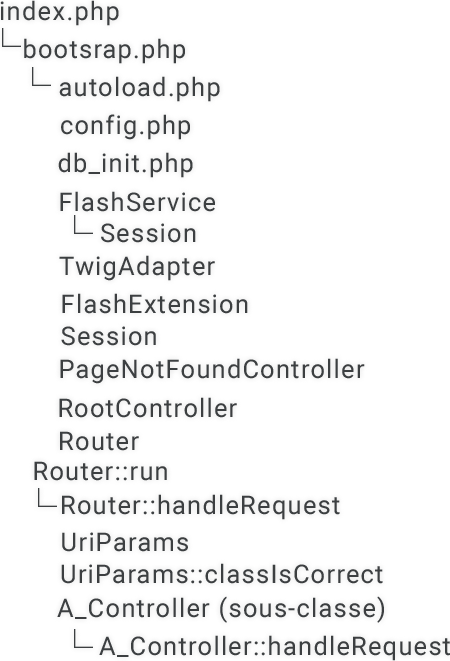
<style>
.page{position:relative;width:450px;height:661px;background:#ffffff}
.page>*{position:absolute;margin:0}
.t1{font:25.6px "Roboto-Regular";letter-spacing:0.05em;color:#3c3f41}
.t2{font:25.4px "Roboto-Regular";letter-spacing:0.05em;color:#3c3f41}
</style>
<div class="page">
<p class="t1" style="left:0px;top:0px;width:119px;height:26px">index.php</p>
<p class="t2" style="left:24px;top:38px;width:161px;height:26px">bootsrap.php</p>
<p class="t2" style="left:59px;top:76px;width:161px;height:26px">autoload.php</p>
<p class="t2" style="left:61px;top:114px;width:129px;height:26px">config.php</p>
<p class="t2" style="left:58px;top:152px;width:135px;height:26px">db_init.php</p>
<p class="t2" style="left:60px;top:191px;width:155px;height:21px">FlashService</p>
<p class="t2" style="left:101px;top:223px;width:95px;height:20px">Session</p>
<p class="t2" style="left:59px;top:255px;width:156px;height:26px">TwigAdapter</p>
<p class="t2" style="left:62px;top:293px;width:186px;height:21px">FlashExtension</p>
<p class="t2" style="left:61px;top:326px;width:95px;height:20px">Session</p>
<p class="t2" style="left:60px;top:358px;width:305px;height:26px">PageNotFoundController</p>
<p class="t2" style="left:59px;top:397px;width:178px;height:21px">RootController</p>
<p class="t2" style="left:60px;top:431px;width:79px;height:20px">Router</p>
<p class="t2" style="left:34px;top:461px;width:133px;height:20px">Router::run</p>
<p class="t2" style="left:62px;top:494px;width:278px;height:26px">Router::handleRequest</p>
<p class="t2" style="left:62px;top:532px;width:126px;height:20px">UriParams</p>
<p class="t2" style="left:61px;top:563px;width:322px;height:21px">UriParams::classIsCorrect</p>
<p class="t2" style="left:57px;top:596px;width:327px;height:27px">A_Controller (sous-classe)</p>
<p class="t2" style="left:99px;top:635px;width:351px;height:26px">A_Controller::handleRequest</p>
</div>
